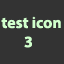
<style>
.page{position:relative;width:64px;height:64px;background:#333333}
.page>*{position:absolute;margin:0}
.t1{font:16px "MyriadPro-Bold";color:#d0ffcc}
</style>
<div class="page">
<p class="t1" style="left:1px;top:16px;width:60px;height:32px">test icon <br>       3</p>
</div>
